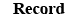
<style>
.page{position:relative;width:80px;height:20px;background:#ffffff}
.page>*{position:absolute;margin:0}
.t1{font:16.7px "TimesNewRomanPS-BoldMT";color:#000000}
</style>
<div class="page">
<p class="t1" style="left:13px;top:3px;width:52px;height:11px">Record</p>
</div>
